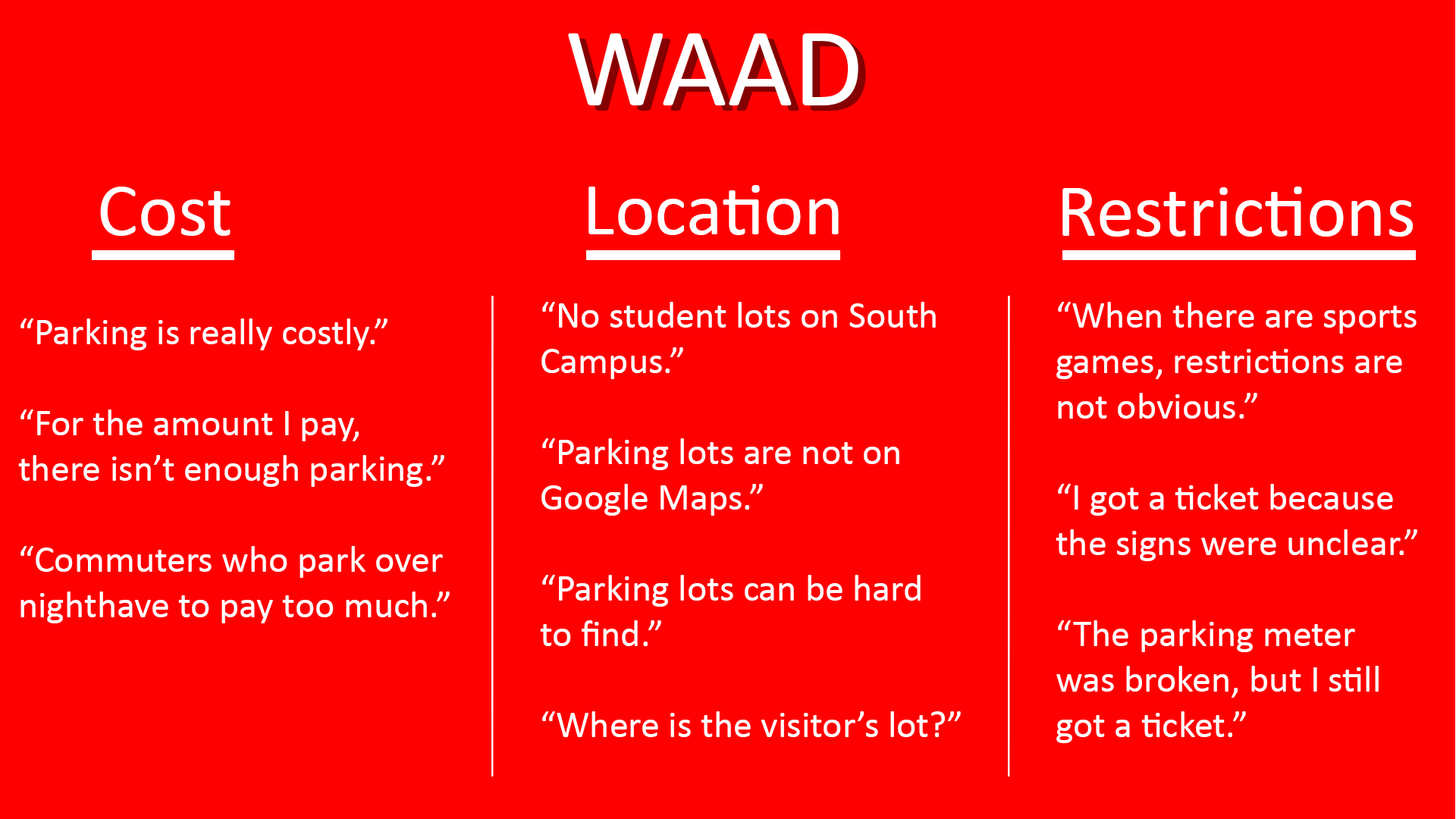
<style>
.page{position:relative;width:1456px;height:819px;background:#ff0000}
.page>*{position:absolute;margin:0}
.t1{font:113.7px "Calibri";color:#ffffff}
.t2{font:75.8px "Calibri";color:#ffffff}
.t3{font:37.9px "Calibri";color:#ffffff}
</style>
<div class="page">
<p class="t1" style="left:568px;top:33px;width:290px;height:72px">WAAD</p>
<p class="t2" style="left:588px;top:185px;width:251px;height:50px">Location</p>
<p class="t2" style="left:100px;top:187px;width:131px;height:49px">Cost</p>
<p class="t2" style="left:1062px;top:187px;width:351px;height:50px">Restrictions</p>
<p class="t3" style="left:540px;top:302px;width:421px;height:435px">“No student lots on South<br>Campus.”<br><br>“Parking lots are not on<br>Google Maps.”<br><br>“Parking lots can be hard<br>to find.”<br><br>“Where is the visitor’s lot?”</p>
<p class="t3" style="left:1056px;top:302px;width:361px;height:441px">“When there are sports<br>games, restrictions are<br>not obvious.”<br><br>“I got a ticket because<br>the signs were unclear.”<br><br>“The parking meter<br>was broken, but I still<br>got a ticket.”</p>
<p class="t3" style="left:18px;top:318px;width:432px;height:305px">“Parking is really costly.”<br><br>“For the amount I pay, <br>there isn’t enough parking.”<br><br>“Commuters who park over <br>nighthave to pay too much.”</p>
</div>
